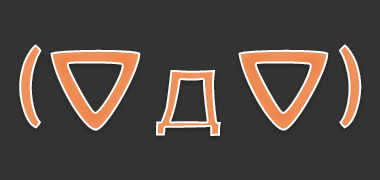
<style>
.page{position:relative;width:380px;height:180px;background:#333333}
.page>*{position:absolute;margin:0}
.t1{font:100px "KFhimaji";letter-spacing:-0.06em}
</style>
<div class="page">
<p class="t1" style="left:19px;top:44px;width:343px;height:92px">（▽д▽）</p>
</div>
